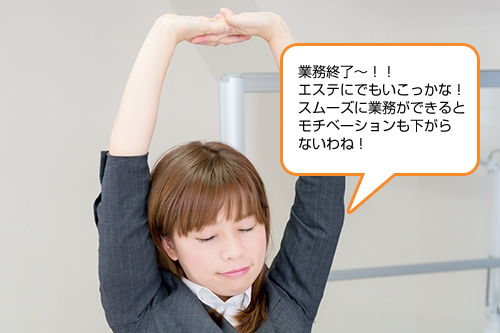
<style>
.page{position:relative;width:500px;height:333px}
.page>*{position:absolute;margin:0}
.t1{font:14px/18px "ShinGoPro-Regular";color:#000000}
.t2{font:14px/14px "ShinGoPro-Regular";color:#000000}
</style>
<div class="page">
<p class="t1" style="left:298px;top:65px;width:167px;height:85px"><span class="t2">業務終了～</span>！！<br>エステにでもいこっかな！<br>スムーズに業務ができると<br>モチベーションも下がら<br>ないわね！</p>
</div>
